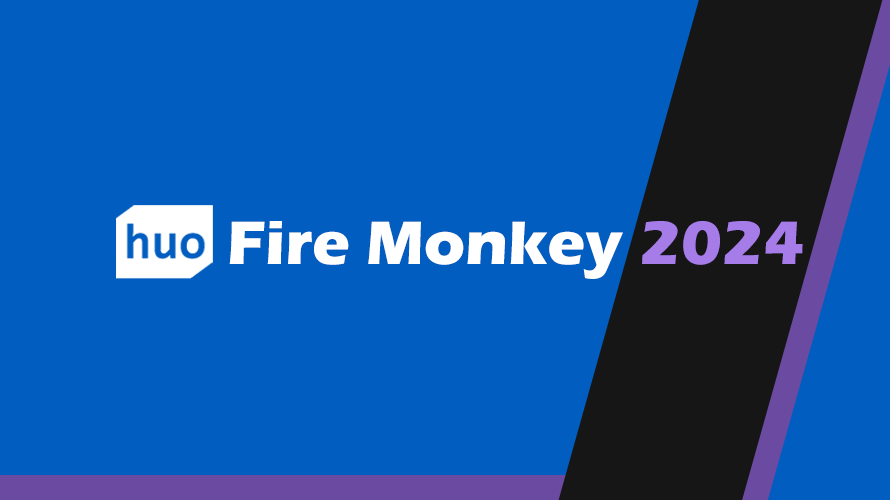
<style>
.page{position:relative;width:890px;height:500px;background:#015dbf}
.page>*{position:absolute;margin:0}
.t1{font:63.3px "ErasITC-Bold";color:#ffffff}
.t2{font:63.3px "ErasITC-Bold";color:#a67de8}
</style>
<div class="page">
<p class="t1" style="left:229px;top:221px;width:394px;height:58px">Fire Monkey</p>
<p class="t2" style="left:642px;top:221px;width:161px;height:44px">2024</p>
</div>
